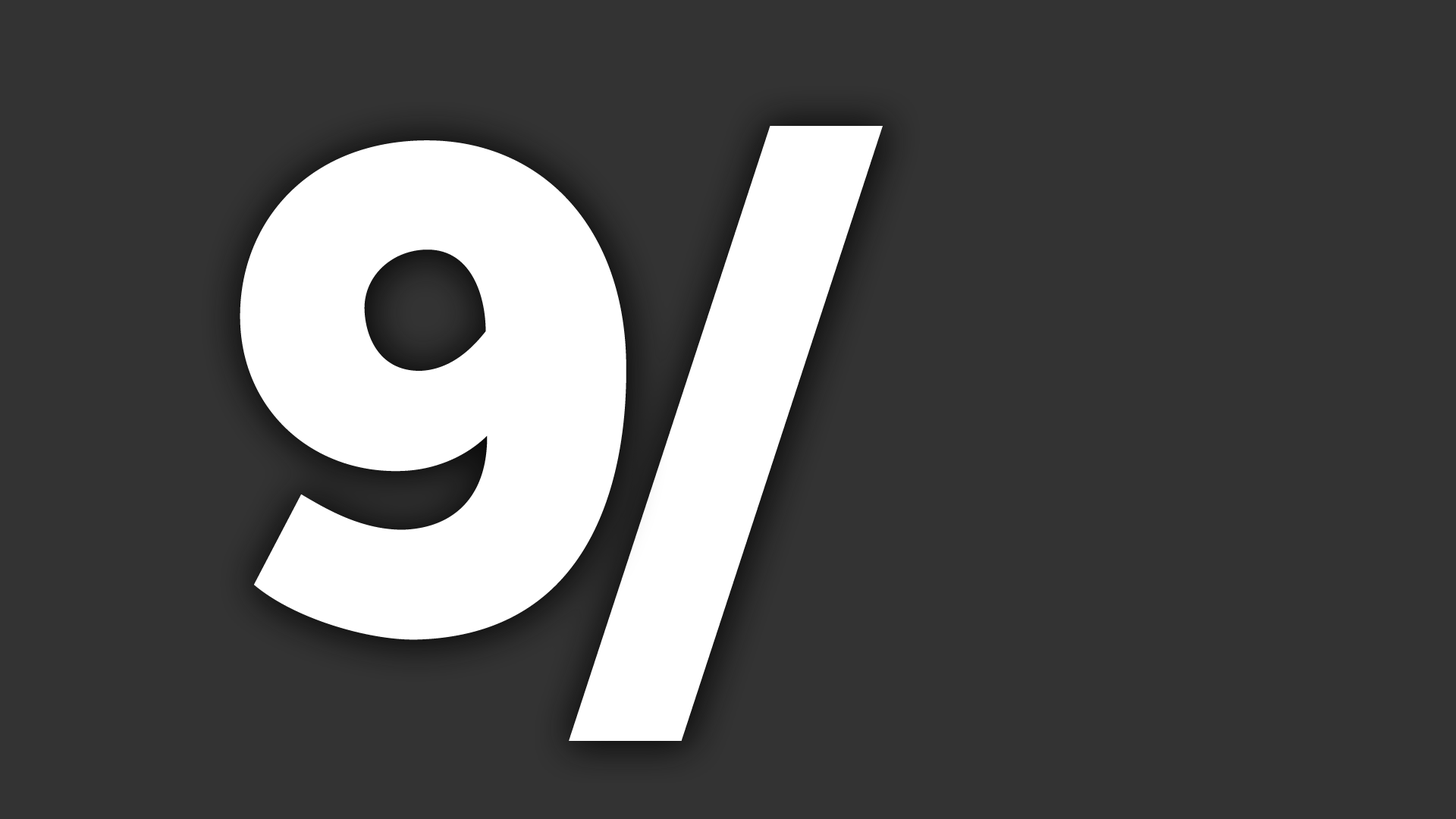
<style>
.page{position:relative;width:1456px;height:819px;background:#333333}
.page>*{position:absolute;margin:0}
.t1{font:693.8px "ChunkFive-Roman";letter-spacing:0.02em;color:#ffffff}
</style>
<div class="page">
<p class="t1" style="left:569px;top:126px;width:314px;height:615px">/</p>
<p class="t1" style="left:240px;top:140px;width:386px;height:500px">9</p>
</div>
